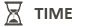
<style>
.page{position:relative;width:108px;height:27px;background:#ffffff}
.page>*{position:absolute;margin:0}
.t1{font:18px "Calibri-Bold";color:#4b4741}
</style>
<div class="page">
<p class="t1" style="left:34px;top:8px;width:38px;height:11px">TIME</p>
</div>
